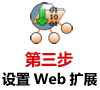
<style>
.page{position:relative;width:100px;height:90px;background:#ffffff}
.page>*{position:absolute;margin:0}
.t1{font:16px "MicrosoftYaHei";color:#d70707}
.t2{font:14px "MicrosoftYaHei";color:#000000}
</style>
<div class="page">
<p class="t1" style="left:25px;top:51px;width:48px;height:17px">第三步</p>
<p class="t2" style="left:2px;top:72px;width:95px;height:14px">设置Web扩展</p>
</div>
